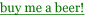
<style>
.page{position:relative;width:87px;height:15px;background:#ffffff}
.page>*{position:absolute;margin:0}
.t1{font:13px "Georgia";color:#077500;text-decoration:underline}
</style>
<div class="page">
<p class="t1" style="left:0px;top:2px;width:85px;height:13px">buy me a beer!</p>
</div>
